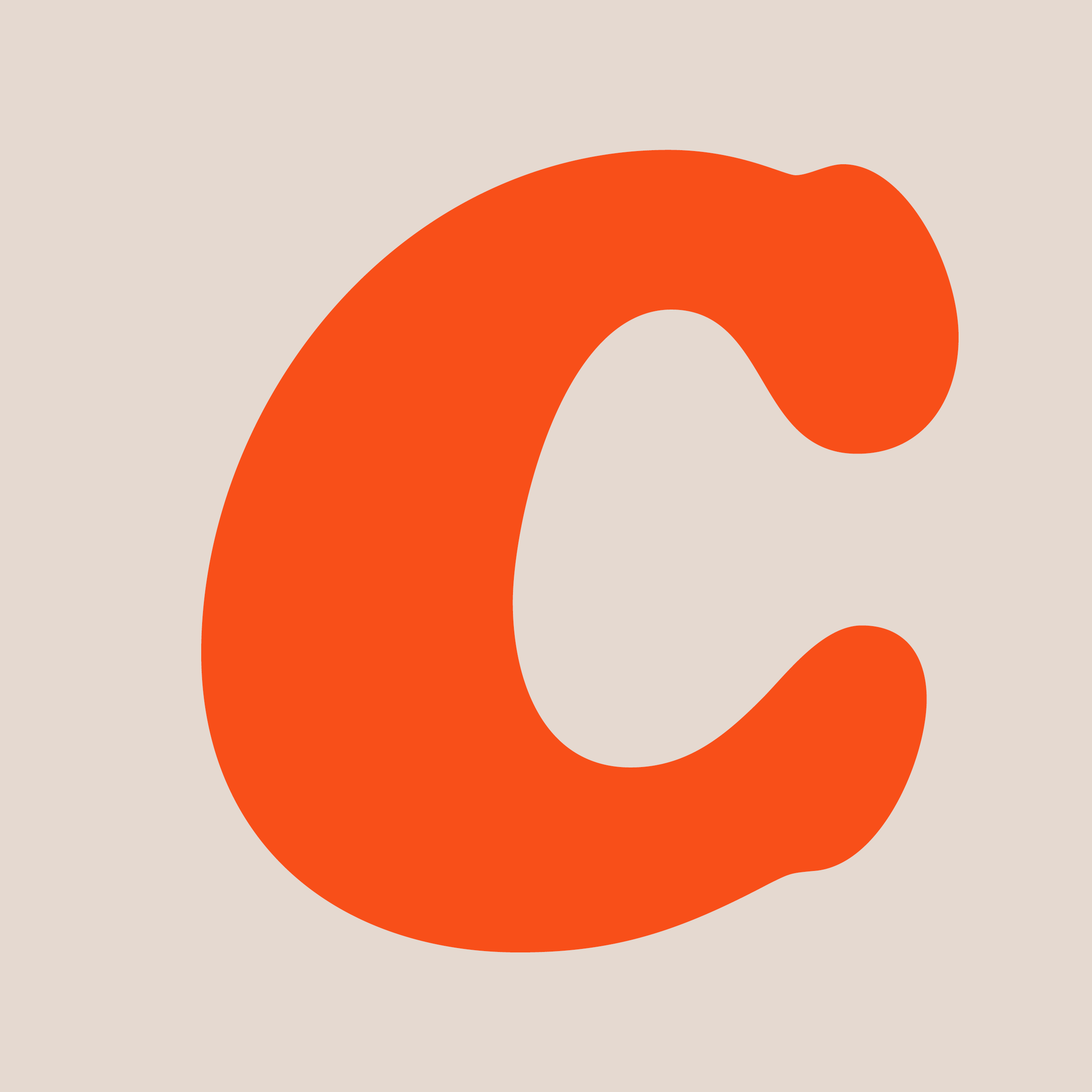
<style>
.page{position:relative;width:1092px;height:1092px;background:#e5d9d0}
.page>*{position:absolute;margin:0}
.t1{font:1100.8px "CooperBlackStd-Italic";letter-spacing:-0.02em;color:#f84f19}
</style>
<div class="page">
<p class="t1" style="left:201px;top:150px;width:758px;height:802px">C</p>
</div>
